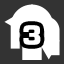
<style>
.page{position:relative;width:64px;height:64px;background:#333333}
.page>*{position:absolute;margin:0}
.t1{font:36px "EurostileNextLTCom-Bold";color:#ffffff;font-variant:small-caps}
</style>
<div class="page">
<p class="t1" style="left:23px;top:25px;width:18px;height:20px">3</p>
</div>
